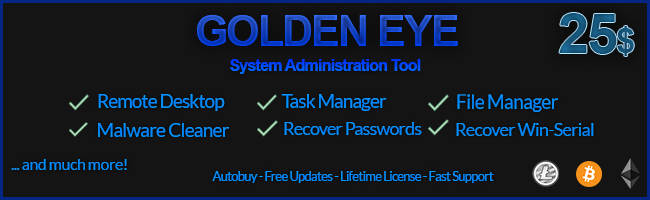
<style>
.page{position:relative;width:650px;height:200px;background:#141414}
.page>*{position:absolute;margin:0}
.t1{font:42.6px "Arial-BoldMT";letter-spacing:-0.04em}
.t2{font:55.8px "Arial-BoldMT";letter-spacing:-0.04em;color:#16557a}
.t3{font:35.1px "Arial-BoldMT";letter-spacing:-0.04em;color:#16557a}
.t4{font:15.7px "Arial-BoldMT";letter-spacing:-0.04em;color:#004bff}
.t5{font:18.9px "Lato-Regular";letter-spacing:-0.04em;color:#008dff}
.t6{font:18.9px "Lato-Regular";letter-spacing:-0.04em;color:#008eff}
.t7{font:20px "Lato-Regular";letter-spacing:-0.04em;color:#008eff;scale:0.97 1}
.t8{font:17.6px "Lato-Regular";letter-spacing:-0.04em;color:#008eff}
.t9{font:17.8px "Lato-Regular";letter-spacing:-0.04em;color:#008eff}
.t10{font:16.3px "Lato-Regular";letter-spacing:-0.04em;color:#0092ff}
.t11{font:12.6px "Lato-Regular";letter-spacing:-0.04em;color:#008fff}
</style>
<div class="page">
<p class="t1" style="left:197px;top:15px;width:261px;height:31px">GOLDEN EYE</p>
<p class="t2" style="left:559px;top:13px;width:75px;height:43px">25<span class="t3">$</span></p>
<p class="t4" style="left:230px;top:59px;width:191px;height:15px">System Administration Tool</p>
<p class="t5" style="left:98px;top:94px;width:127px;height:17px">Remote Desktop</p>
<p class="t6" style="left:281px;top:94px;width:106px;height:17px">Task Manager</p>
<p class="t7" style="left:457px;top:94px;width:101px;height:18px">File Manager</p>
<p class="t5" style="left:98px;top:123px;width:131px;height:14px">Malware Cleaner</p>
<p class="t8" style="left:284px;top:122px;width:138px;height:13px">Recover Passwords</p>
<p class="t9" style="left:456px;top:123px;width:138px;height:13px">Recover Win-Serial</p>
<p class="t10" style="left:11px;top:159px;width:116px;height:11px">... and much more!</p>
<p class="t11" style="left:212px;top:171px;width:282px;height:12px">Autobuy - Free Updates - Lifetime License - Fast Support</p>
</div>
